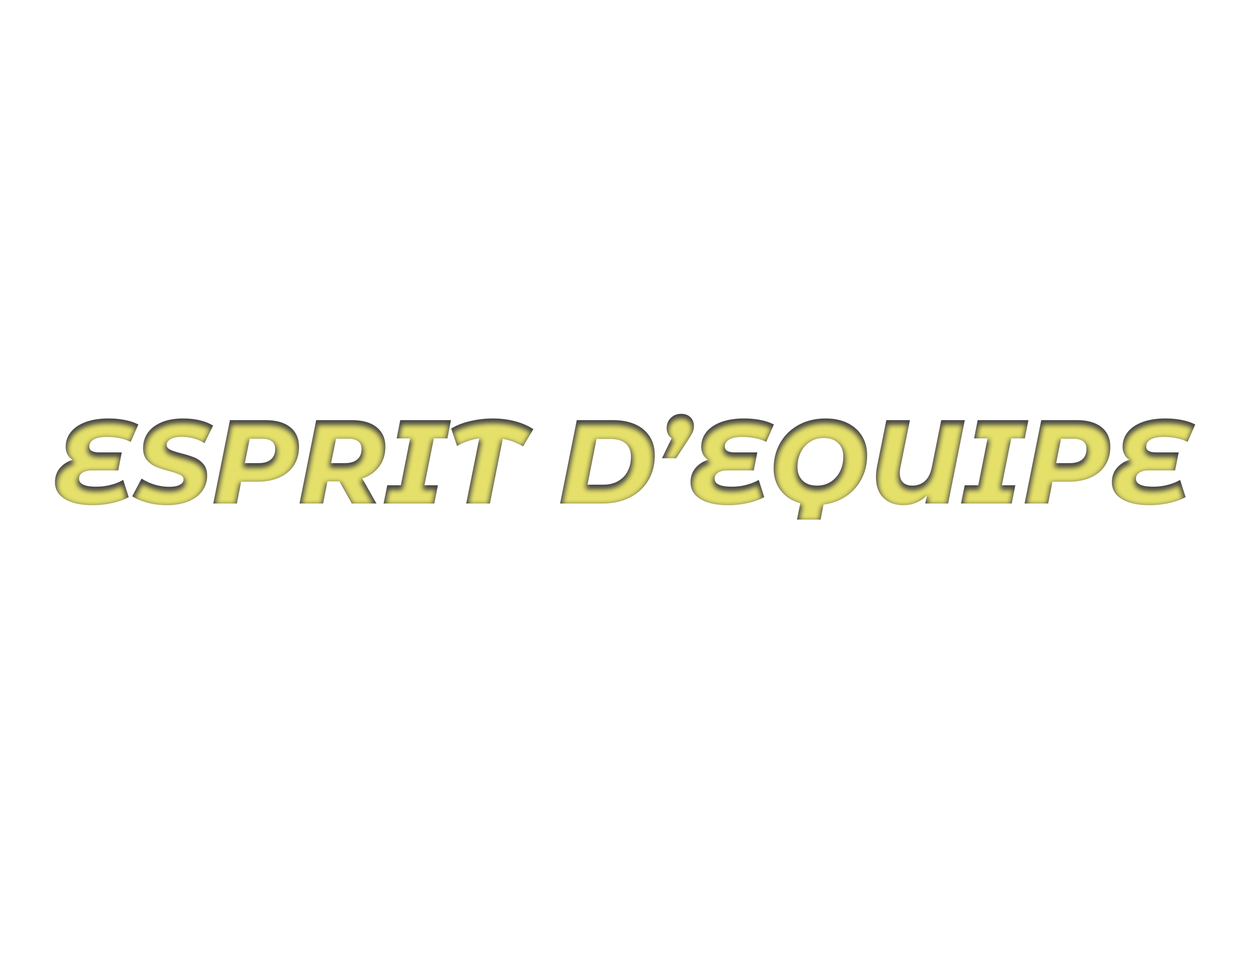
<style>
.page{position:relative;width:1250px;height:954px;background:#ffffff}
.page>*{position:absolute;margin:0}
.t1{font:119.1px "MontserratAlternates-ExtraBoldItalic"}
</style>
<div class="page">
<p class="t1" style="left:55px;top:413px;width:1140px;height:107px">ESPRIT D’EQUIPE</p>
</div>
